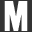
<style>
.page{position:relative;width:32px;height:32px;background:#ffffff}
.page>*{position:absolute;margin:0}
.t1{font:42px "Haettenschweiler";letter-spacing:-0.012em;color:#ffffff;text-transform:uppercase}
</style>
<div class="page">
<p class="t1" style="left:4px;top:1px;width:24px;height:30px">m</p>
</div>
